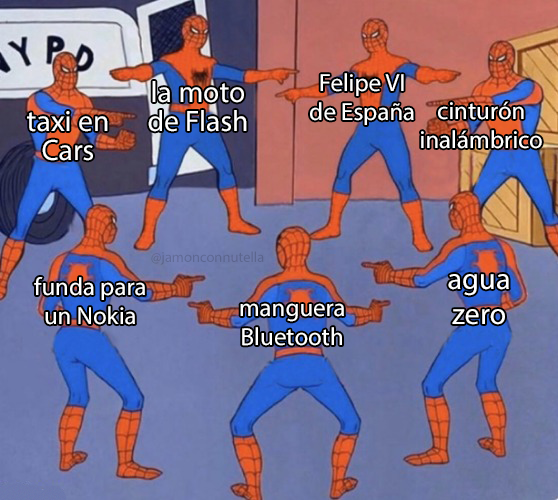
<style>
.page{position:relative;width:558px;height:500px}
.page>*{position:absolute;margin:0}
.t1{font:24.9px "MyriadPro-Regular";color:#ffffff}
.t2{font:29.7px "MyriadPro-Regular";color:#ffffff}
.t3{font:14.5px "MyriadPro-Regular";color:#5c668e}
.t4{font:30.4px "MyriadPro-Regular";color:#ffffff}
</style>
<div class="page">
<p class="t1" style="left:310px;top:73px;width:104px;height:52px;text-align:center">Felipe VI<br>de España</p>
<p class="t2" style="left:148px;top:81px;width:99px;height:51px;text-align:center">la moto<br>de Flash</p>
<p class="t1" style="left:421px;top:101px;width:121px;height:48px;text-align:center">cinturón<br>inalámbrico</p>
<p class="t2" style="left:27px;top:111px;width:81px;height:50px;text-align:center">taxi en<br>Cars</p>
<p class="t3" style="left:151px;top:251px;width:113px;height:14px">@jamonconnutella</p>
<p class="t1" style="left:34px;top:277px;width:111px;height:48px;text-align:center">funda para<br>un Nokia</p>
<p class="t4" style="left:448px;top:274px;width:61px;height:51px;text-align:center">agua<br>zero</p>
<p class="t1" style="left:240px;top:303px;width:104px;height:43px;text-align:center">manguera<br>Bluetooth</p>
</div>
